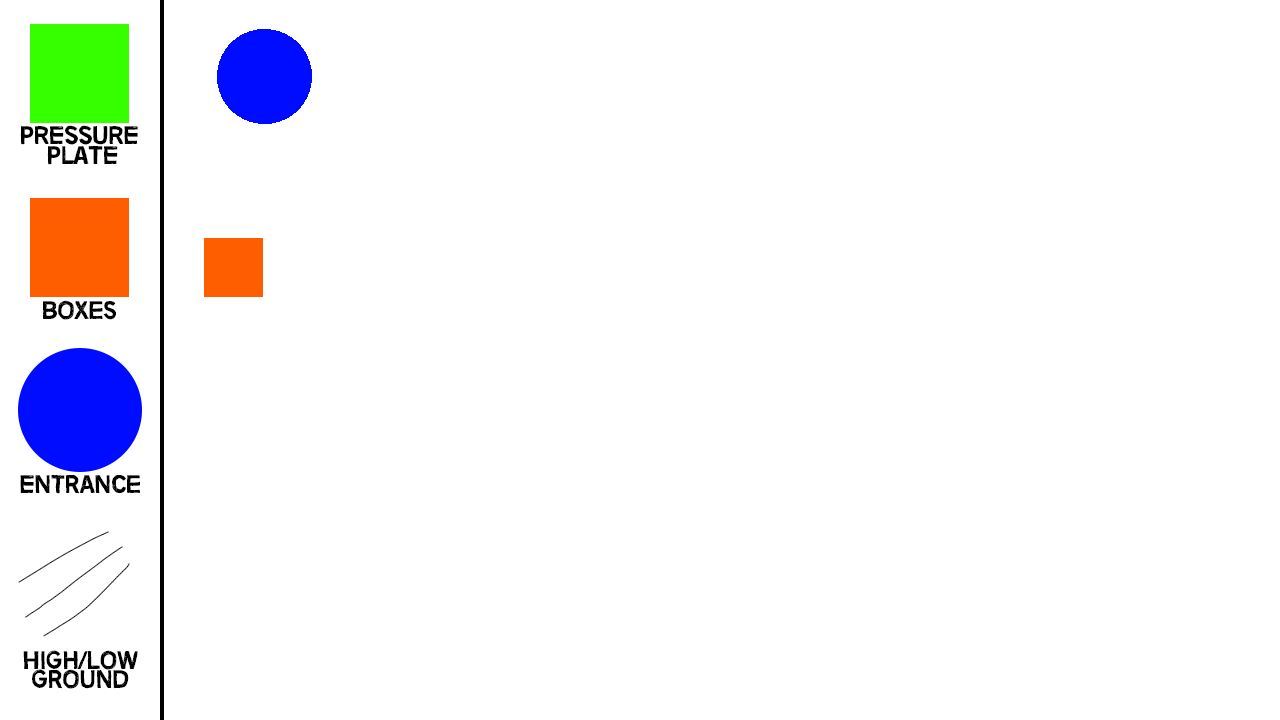
<style>
.page{position:relative;width:1280px;height:720px;background:#ffffff}
.page>*{position:absolute;margin:0}
.t1{font:25.5px/19.5px "No-more-lies";color:#000000}
.t2{font:25.5px "No-more-lies";color:#000000}
</style>
<div class="page">
<p class="t1" style="left:20px;top:125px;width:118px;height:40px;text-align:center">pressure <br>plate</p>
<p class="t2" style="left:42px;top:300px;width:74px;height:20px">bOXES</p>
<p class="t2" style="left:20px;top:475px;width:120px;height:19px">eNTRANCE</p>
<p class="t1" style="left:23px;top:650px;width:115px;height:39px;text-align:center">hIGH/LOW<br>GROUND</p>
</div>
